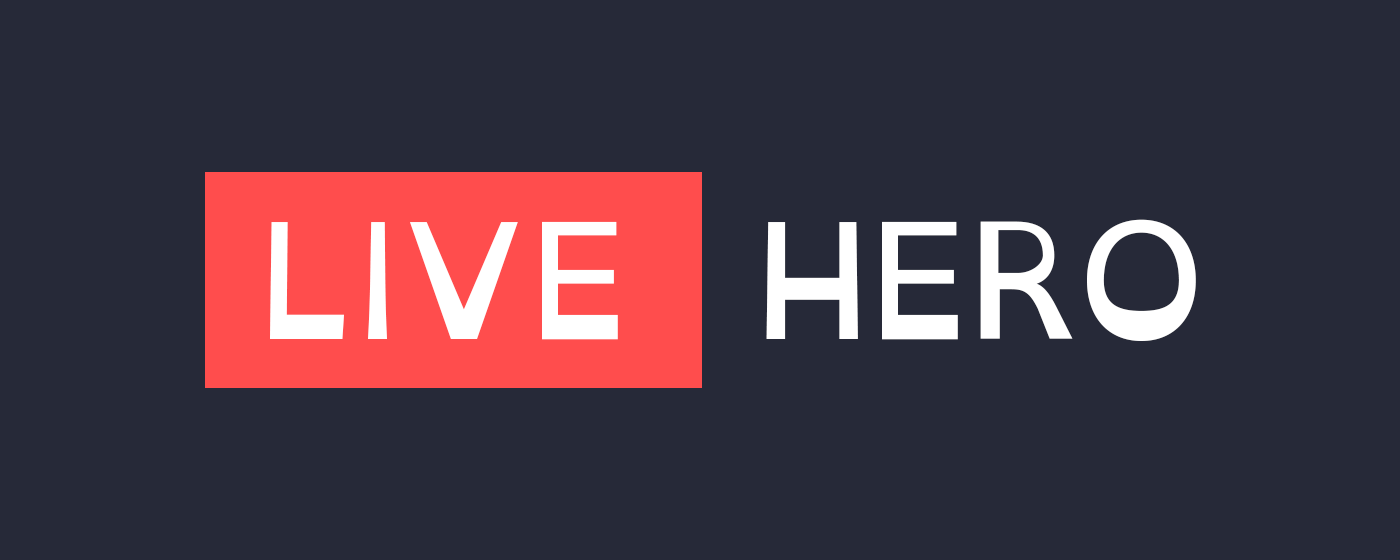
<style>
.page{position:relative;width:1400px;height:560px;background:#262938}
.page>*{position:absolute;margin:0}
.t1{font:160.4px "OpenDyslexic-Regular";color:#ffffff}
</style>
<div class="page">
<p class="t1" style="left:270px;top:219px;width:926px;height:122px">LIVE  HERO</p>
</div>
